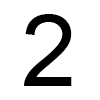
<style>
.page{position:relative;width:100px;height:100px;background:#ffffff}
.page>*{position:absolute;margin:0}
.t1{font:100px "ArialMT";color:#000000}
</style>
<div class="page">
<p class="t1" style="left:24px;top:14px;width:48px;height:72px">2</p>
</div>
